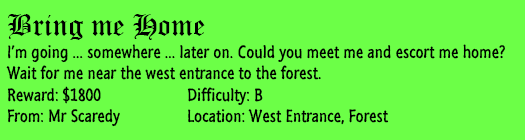
<style>
.page{position:relative;width:525px;height:140px;background:#6cff47}
.page>*{position:absolute;margin:0}
.t1{font:18px "SegoeMarker";color:#000000}
.t2{font:30px "OldEnglishTextMT";color:#000000}
</style>
<div class="page">
<p class="t1" style="left:6px;top:14px;width:499px;height:113px"><span class="t2">Bring me Home<br></span>I’m going ... somewhere ... later on. Could you meet me and escort me home?<br>Wait for me near the west entrance to the forest.<br>Reward: $1800   Difficulty: B<br>From: Mr Scaredy  Location: West Entrance, Forest</p>
</div>
